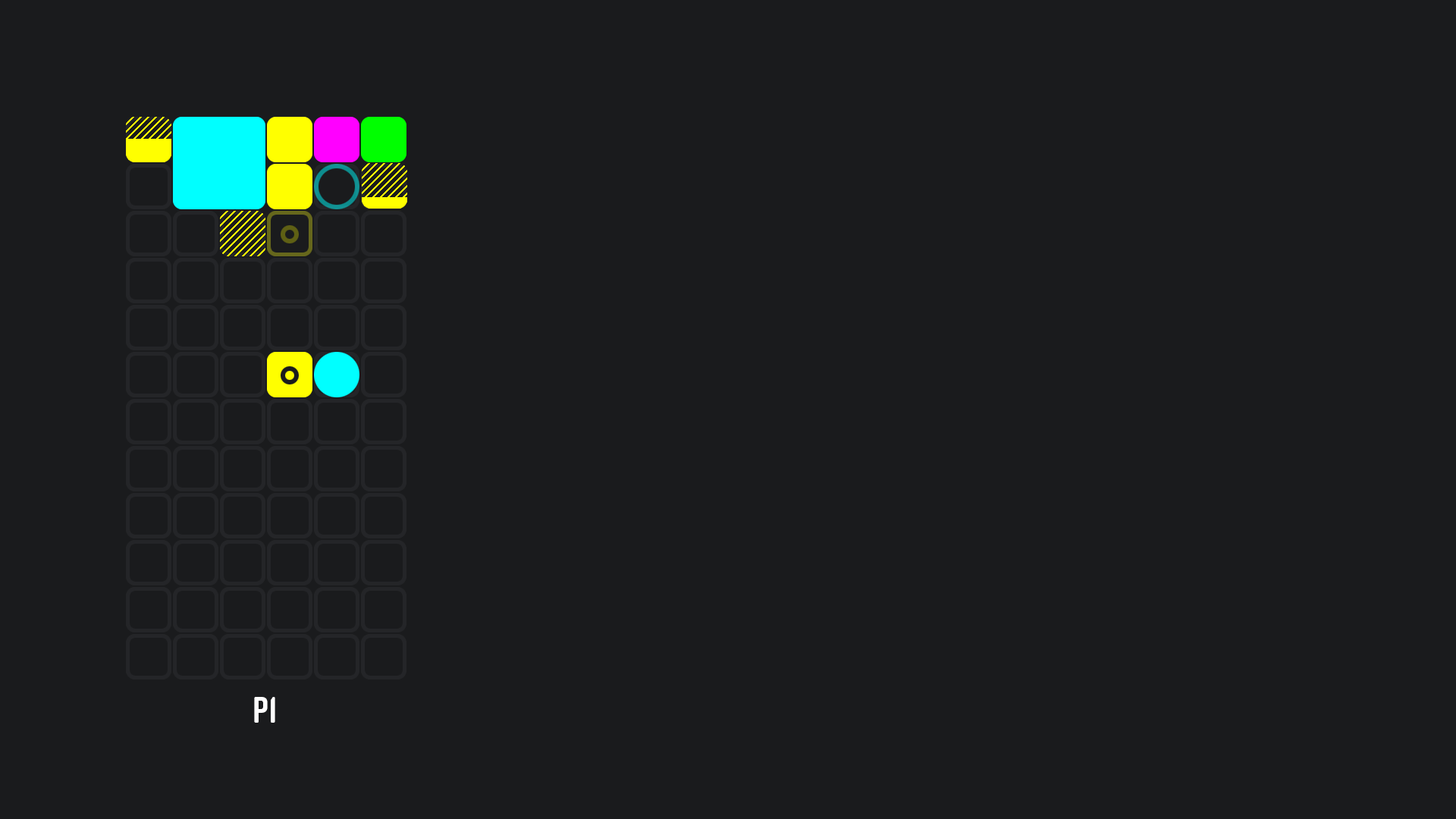
<style>
.page{position:relative;width:1456px;height:819px;background:#1a1b1d}
.page>*{position:absolute;margin:0}
.t1{font:36.4px "RiftSoft-Bold";color:#ffffff}
</style>
<div class="page">
<p class="t1" style="left:254px;top:697px;width:21px;height:26px">P1</p>
</div>
